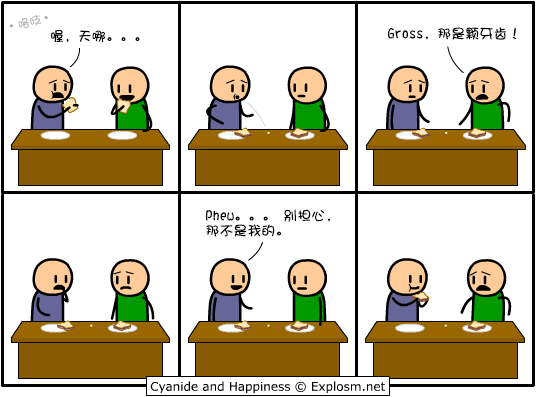
<style>
.page{position:relative;width:536px;height:397px;background:#ffffff}
.page>*{position:absolute;margin:0}
.t1{font:12px "DFShaoNvW5";color:#bbbbbb}
.t2{font:14px "DFShaoNvW5";color:#000000}
.t3{font:14px/15px "DFShaoNvW5";color:#000000}
</style>
<div class="page">
<p class="t1" style="left:18px;top:14px;width:24px;height:14px;rotate:-15deg">咯吱</p>
<p class="t2" style="left:51px;top:30px;width:89px;height:13px">喔，天哪。。。</p>
<p class="t2" style="left:388px;top:27px;width:128px;height:13px">Gross，那是颗牙齿！</p>
<p class="t3" style="left:206px;top:209px;width:124px;height:28px">Phew。。。 别担心，<br>那不是我的。</p>
</div>
